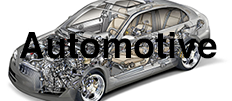
<style>
.page{position:relative;width:232px;height:101px;background:#ffffff}
.page>*{position:absolute;margin:0}
.t1{font:36px "Helvetica-Bold";color:#000000}
</style>
<div class="page">
<p class="t1" style="left:19px;top:32px;width:198px;height:27px">Automotive</p>
</div>
